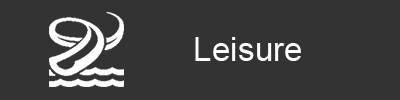
<style>
.page{position:relative;width:400px;height:100px;background:#333333}
.page>*{position:absolute;margin:0}
.t1{font:33.3px "ArialMT";color:#ffffff}
</style>
<div class="page">
<p class="t1" style="left:195px;top:37px;width:106px;height:24px">Leisure</p>
</div>
